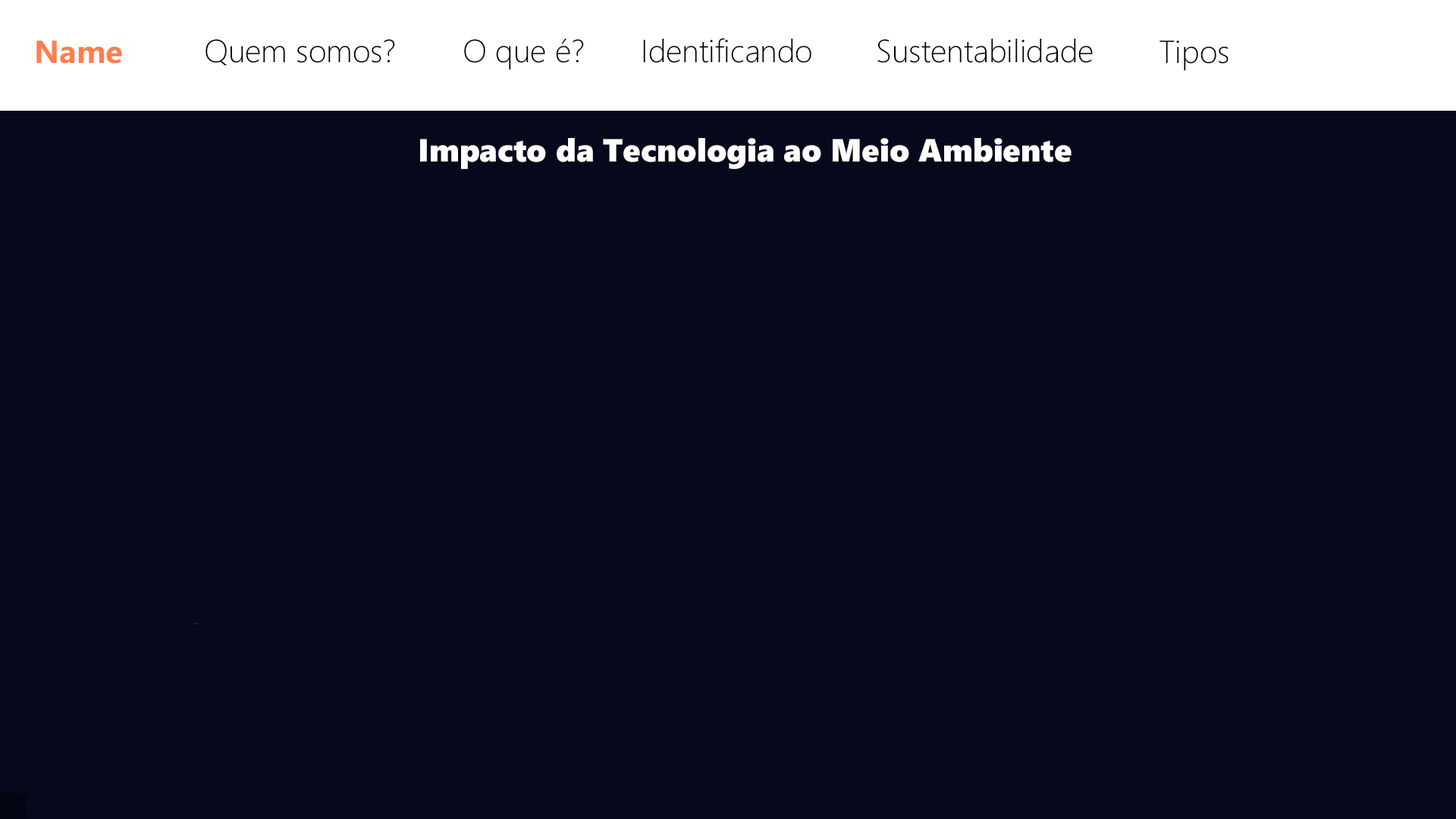
<style>
.page{position:relative;width:1456px;height:819px;background:#06081b}
.page>*{position:absolute;margin:0}
.t1{font:54.6px "SegoeUI-Bold";color:#ff7e4d}
.t2{font:54.6px "SegoeUI-Light";color:#000000}
.t3{font:54.6px "SegoeUIBlack";color:#ffffff}
</style>
<div class="page">
<p class="t1" style="left:36px;top:40px;width:86px;height:24px">Name</p>
<p class="t2" style="left:206px;top:39px;width:189px;height:26px">Quem somos?</p>
<p class="t2" style="left:464px;top:39px;width:120px;height:31px">O que é?</p>
<p class="t2" style="left:643px;top:38px;width:168px;height:25px">Identificando</p>
<p class="t2" style="left:877px;top:39px;width:216px;height:24px">Sustentabilidade</p>
<p class="t2" style="left:1159px;top:40px;width:69px;height:31px">Tipos</p>
<p class="t3" style="left:420px;top:138px;width:652px;height:31px">Impacto da Tecnologia ao Meio Ambiente</p>
</div>
